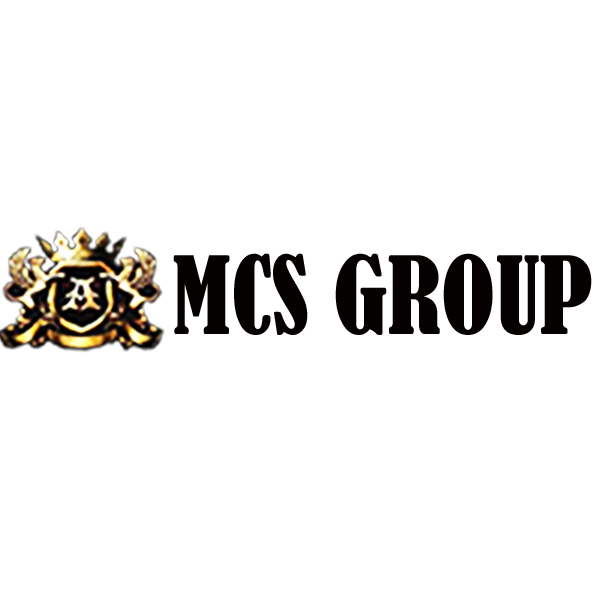
<style>
.page{position:relative;width:600px;height:600px;background:#ffffff}
.page>*{position:absolute;margin:0}
.t1{font:100px "BernardMT-Condensed";color:#060101}
</style>
<div class="page">
<p class="t1" style="left:173px;top:253px;width:419px;height:82px">MCS GROUP</p>
</div>
